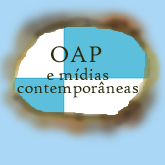
<style>
.page{position:relative;width:165px;height:165px;background:#aad7f6}
.page>*{position:absolute;margin:0}
.t1{font:24px "HighTowerText-Reg";color:#2b2c0c}
.t2{font:18px "HighTowerText-Reg";color:#2b2c0c}
</style>
<div class="page">
<p class="t1" style="left:51px;top:46px;width:51px;height:17px">OAP</p>
<p class="t2" style="left:47px;top:67px;width:62px;height:14px">e mídias</p>
<p class="t2" style="left:17px;top:81px;width:121px;height:17px">contemporâneas</p>
</div>
